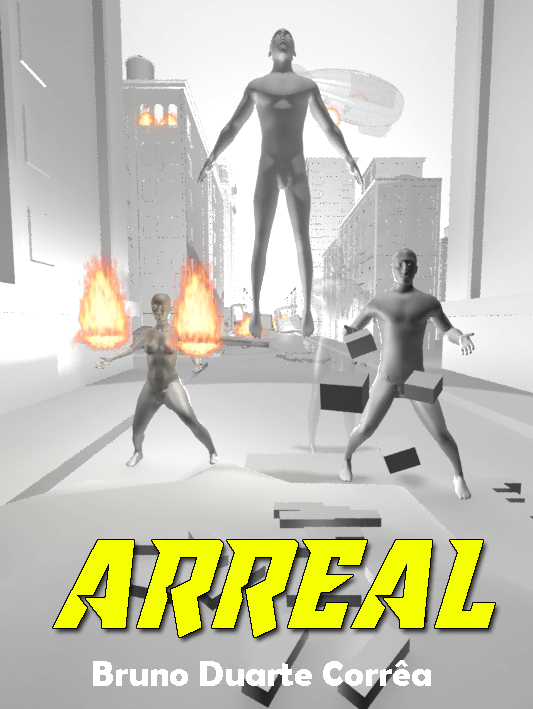
<style>
.page{position:relative;width:533px;height:709px}
.page>*{position:absolute;margin:0}
.t1{font:100px "RaiderCrusaderExpanded";color:#f6ff00}
.t2{font:36px "BerlinSansFBDemi-Bold";color:#ffffff}
</style>
<div class="page">
<p class="t1" style="left:53px;top:540px;width:442px;height:97px">ARREAL</p>
<p class="t2" style="left:93px;top:660px;width:338px;height:26px">Bruno Duarte Corrêa</p>
</div>
